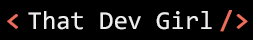
<style>
.page{position:relative;width:253px;height:40px;background:#000000}
.page>*{position:absolute;margin:0}
.t1{font:26px "Consolas";color:#ed6d5c;font-weight:bold}
.t2{font:26px "Consolas";color:#eeeeee}
</style>
<div class="page">
<p class="t1" style="left:7px;top:14px;width:11px;height:15px">&lt;</p>
<p class="t2" style="left:28px;top:11px;width:184px;height:19px">That Dev Girl</p>
<p class="t1" style="left:220px;top:10px;width:28px;height:22px">/&gt;</p>
</div>
